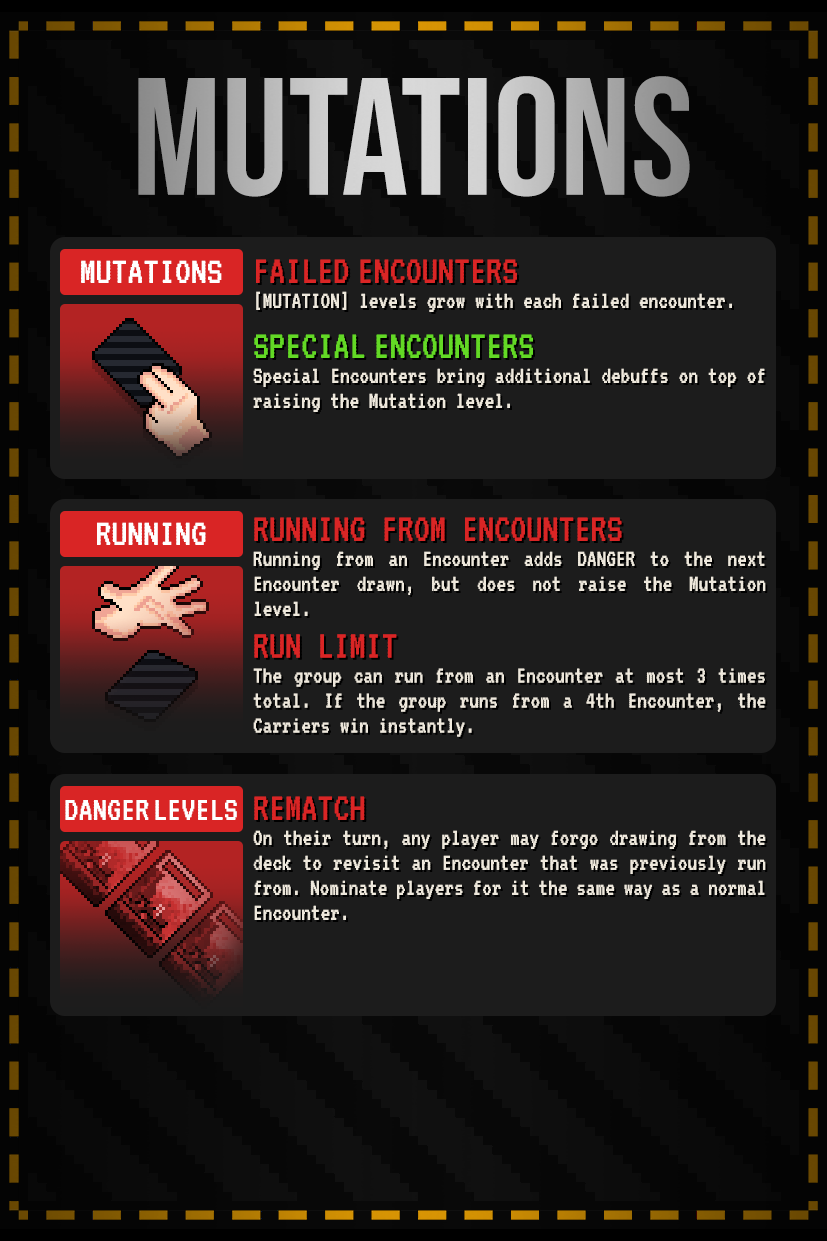
<style>
.page{position:relative;width:827px;height:1241px;background:#1c1c1c}
.page>*{position:absolute;margin:0}
.t1{font:166.7px "BebasNeue-Regular"}
.t2{font:39.7px "VT323-Regular";color:#ffffff}
.t3{font:25px/25px "VT323-Regular";color:#eee8dc;scale:0.96 1}
.t4{font:41.7px "VT323-Regular";color:#d92525;scale:0.96 1}
.t5{font:41.7px "VT323-Regular";color:#63d925;scale:0.96 1}
.t6{font:41.7px/25px "VT323-Regular";color:#d92525;scale:0.96 1}
.t7{font:35.4px "VT323-Regular";color:#ffffff}
</style>
<div class="page">
<p class="t1" style="left:138px;top:76px;width:552px;height:121px">MUTATIONS</p>
<p class="t2" style="left:81px;top:260px;width:141px;height:23px">MUTATIONS</p>
<p class="t3" style="left:253px;top:259px;width:512px;height:153px;text-align:justify"><span class="t4">FAILED ENCOUNTERS<br></span>[MUTATION] levels grow with each failed encounter.<br><span class="t5">SPECIAL ENCOUNTERS<br></span>Special Encounters bring additional debuffs on top of raising the Mutation level.</p>
<p class="t3" style="left:253px;top:517px;width:513px;height:220px;text-align:justify"><span class="t4">RUNNING FROM ENCOUNTERS<br></span>Running from an Encounter adds DANGER to the next Encounter drawn, but does not raise the Mutation level.<br><br><span class="t6">RUN LIMIT<br></span>The group can run from an Encounter at most 3 times total. If the group runs from a 4th Encounter, the Carriers win instantly.</p>
<p class="t2" style="left:97px;top:522px;width:109px;height:23px">RUNNING</p>
<p class="t3" style="left:253px;top:796px;width:513px;height:124px;text-align:justify"><span class="t4">REMATCH<br></span>On their turn, any player may forgo drawing from the deck to revisit an Encounter that was previously run from. Nominate players for it the same way as a normal Encounter.</p>
<p class="t7" style="left:65px;top:800px;width:172px;height:20px">DANGER LEVELS</p>
</div>
